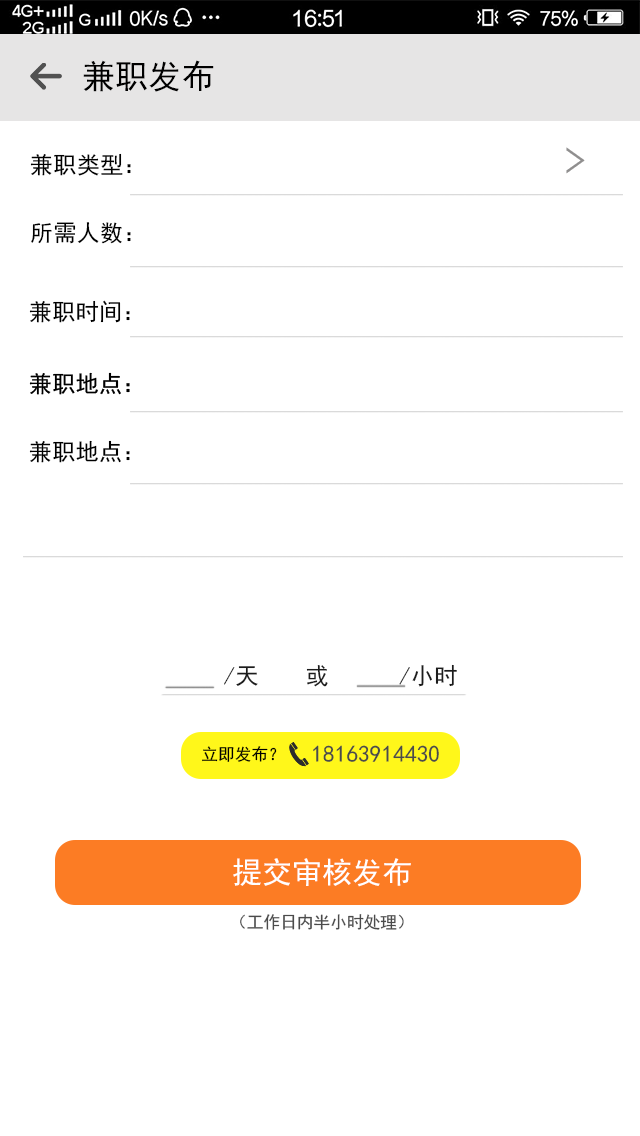
<style>
.page{position:relative;width:640px;height:1136px;background:#ffffff}
.page>*{position:absolute;margin:0}
.t1{font:33.3px "SimHei";letter-spacing:0.002em;color:#000000}
.t2{font:23.3px "SimHei";letter-spacing:0.002em;color:#010101}
.t3{font:23.3px "SimHei";letter-spacing:0.002em;color:#000000}
.t4{font:23.3px "SimHei";letter-spacing:0.002em;color:#1c1c1c}
.t5{font:16.7px "SimHei";letter-spacing:0.002em;color:#010101}
.t6{font:23.3px "SimHei";letter-spacing:0.002em;color:#4b4b4b}
.t7{font:30px "SimHei";letter-spacing:0.002em;color:#ffffff}
.t8{font:16.7px "SimHei";letter-spacing:0.002em;color:#4b4b4b}
</style>
<div class="page">
<p class="t1" style="left:83px;top:60px;width:131px;height:32px">兼职发布</p>
<p class="t2" style="left:30px;top:153px;width:101px;height:23px">兼职类型：</p>
<p class="t3" style="left:31px;top:222px;width:100px;height:22px">所需人数：</p>
<p class="t2" style="left:29px;top:300px;width:101px;height:23px">兼职时间：</p>
<p class="t3" style="left:29px;top:440px;width:101px;height:23px">兼职地点：</p>
<p class="t4" style="left:224px;top:664px;width:233px;height:23px">/天    或      /小时</p>
<p class="t5" style="left:202px;top:746px;width:75px;height:16px">立即发布？</p>
<p class="t6" style="left:313px;top:745px;width:126px;height:17px">18163914430</p>
<p class="t7" style="left:233px;top:858px;width:178px;height:29px">提交审核发布</p>
<p class="t8" style="left:240px;top:914px;width:164px;height:16px">（工作日内半小时处理）</p>
</div>
